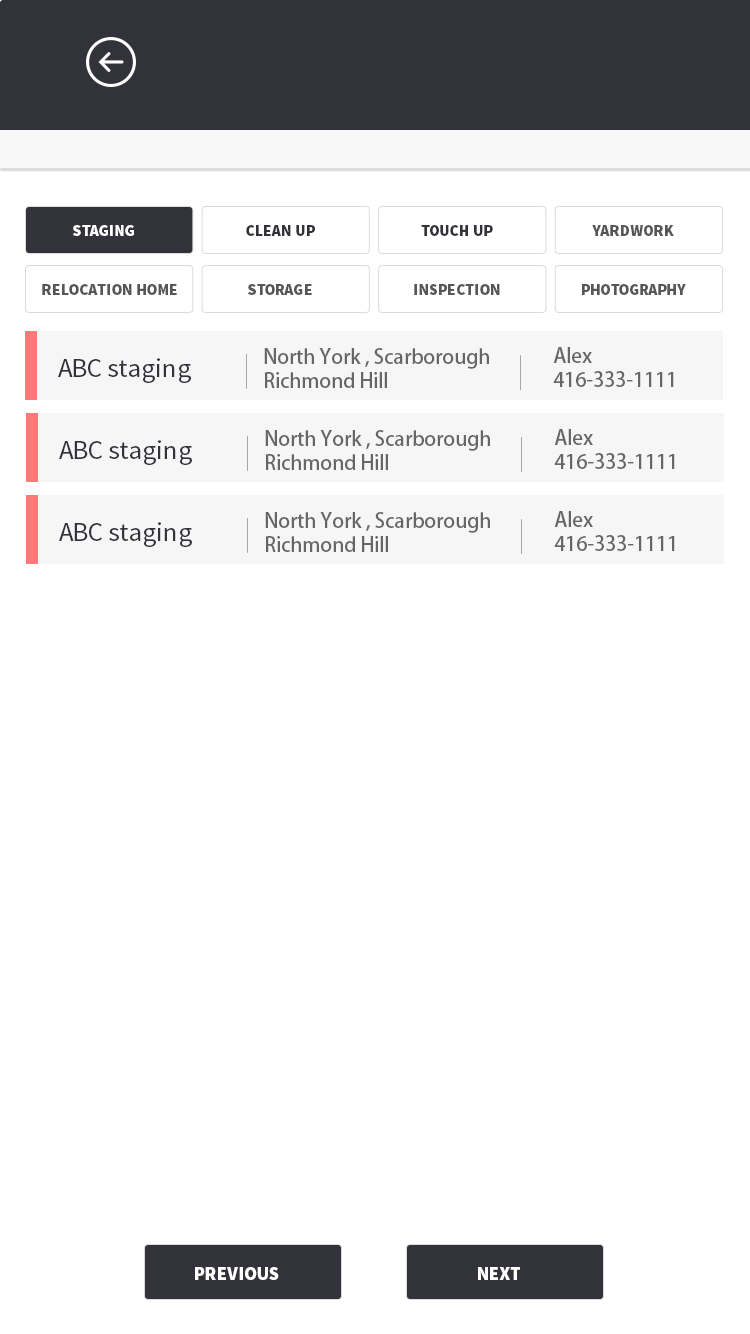
<style>
.page{position:relative;width:750px;height:1334px;background:#ffffff}
.page>*{position:absolute;margin:0}
.t1{font:15.8px "SourceSansPro-Black";color:#ffffff}
.t2{font:15.8px "SourceSansPro-Black";color:#32323a}
.t3{font:15.8px "SourceSansPro-Black";color:#565656}
.t4{font:15.8px "SourceSansPro-Black";color:#565658}
.t5{font:20px "MyriadPro-Regular";color:#666669}
.t6{font:27px "SourceSansPro-Regular";color:#32323a}
.t7{font:18.5px "SourceSansPro-Black";color:#ffffff}
</style>
<div class="page">
<p class="t1" style="left:73px;top:225px;width:61px;height:11px">STAGING</p>
<p class="t2" style="left:246px;top:225px;width:69px;height:11px">CLEAN UP</p>
<p class="t2" style="left:421px;top:225px;width:72px;height:11px">TOUCH UP</p>
<p class="t3" style="left:592px;top:225px;width:82px;height:11px">YARDWORK</p>
<p class="t4" style="left:42px;top:284px;width:135px;height:11px">RELOCATION HOME</p>
<p class="t3" style="left:248px;top:284px;width:64px;height:11px">STORAGE</p>
<p class="t3" style="left:414px;top:284px;width:86px;height:11px">INSPECTION</p>
<p class="t3" style="left:582px;top:284px;width:104px;height:11px">PHOTOGRAPHY</p>
<p class="t5" style="left:264px;top:348px;width:225px;height:40px">North York , Scarborough<br>Richmond Hill</p>
<p class="t5" style="left:553px;top:347px;width:121px;height:40px">Alex<br>416-333-1111</p>
<p class="t6" style="left:58px;top:358px;width:133px;height:25px">ABC staging</p>
<p class="t5" style="left:265px;top:430px;width:225px;height:40px">North York , Scarborough<br>Richmond Hill</p>
<p class="t5" style="left:554px;top:429px;width:121px;height:40px">Alex<br>416-333-1111</p>
<p class="t6" style="left:59px;top:440px;width:133px;height:25px">ABC staging</p>
<p class="t5" style="left:265px;top:512px;width:225px;height:40px">North York , Scarborough<br>Richmond Hill</p>
<p class="t5" style="left:554px;top:511px;width:121px;height:40px">Alex<br>416-333-1111</p>
<p class="t6" style="left:59px;top:522px;width:133px;height:25px">ABC staging</p>
<p class="t7" style="left:195px;top:1267px;width:84px;height:13px">PREVIOUS</p>
<p class="t7" style="left:478px;top:1267px;width:42px;height:13px">NEXT</p>
</div>
